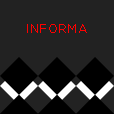
<style>
.page{position:relative;width:114px;height:114px;background:#222222}
.page>*{position:absolute;margin:0}
.t1{font:12px "Gotham-Light";letter-spacing:0.025em;color:#ff0000}
</style>
<div class="page">
<p class="t1" style="left:27px;top:24px;width:60px;height:9px">INFORMA</p>
</div>
